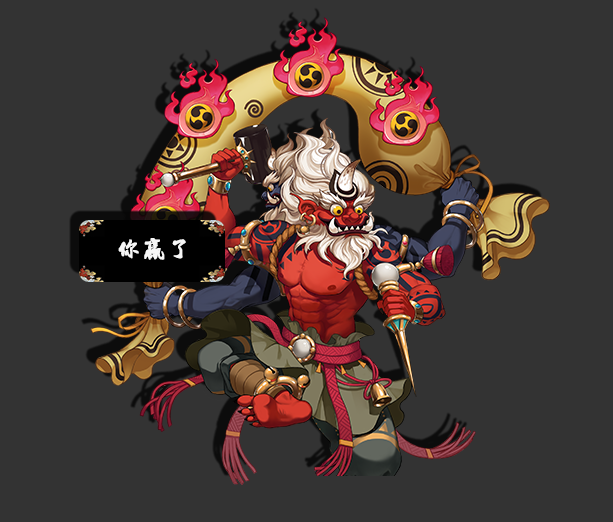
<style>
.page{position:relative;width:613px;height:522px;background:#333333}
.page>*{position:absolute;margin:0}
.t1{font:24.8px "SunYatsenHsingshu-";color:#f6f6f6;font-weight:bold}
</style>
<div class="page">
<p class="t1" style="left:118px;top:238px;width:68px;height:22px">你赢了</p>
</div>
